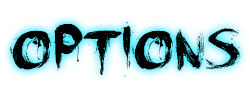
<style>
.page{position:relative;width:250px;height:100px;background:#ffffff}
.page>*{position:absolute;margin:0}
.t1{font:60px "FaceYourFears";color:#0e0e0e}
</style>
<div class="page">
<p class="t1" style="left:10px;top:22px;width:231px;height:56px">Options</p>
</div>
